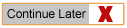
<style>
.page{position:relative;width:127px;height:28px;background:#c6c6c6}
.page>*{position:absolute;margin:0}
.t1{font:12px "ArialMT";color:#020202}
</style>
<div class="page">
<p class="t1" style="left:7px;top:9px;width:79px;height:10px">Continue Later</p>
</div>
